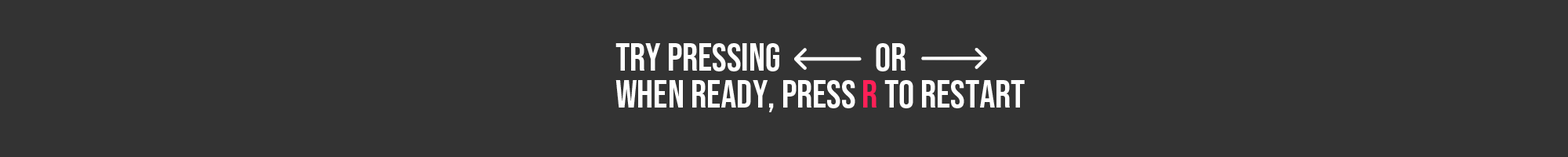
<style>
.page{position:relative;width:1568px;height:157px;background:#333333}
.page>*{position:absolute;margin:0}
.t1{font:9.4px/37.1px "BebasNeue-Regular";color:#ffffff}
.t2{font:9.4px/37.1px "BebasNeue-Regular";color:#ff2057}
</style>
<div class="page">
<p class="t1" style="left:615px;top:43px;width:410px;height:69px">Try pressing               or<br>when ready, press <span class="t2">r</span> to restart</p>
</div>
